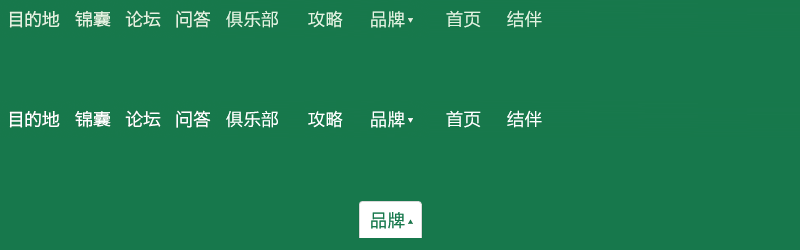
<style>
.page{position:relative;width:800px;height:250px;background:#17784c}
.page>*{position:absolute;margin:0}
.t1{font:17px "YaHei-Consolas-Hybrid";letter-spacing:0.04em;color:#e3f2e1}
.t2{font:17px "YaHei-Consolas-Hybrid";letter-spacing:0.04em;color:#ffffff}
.t3{font:17px "YaHei-Consolas-Hybrid";letter-spacing:0.04em;color:#17784c}
</style>
<div class="page">
<p class="t1" style="left:226px;top:10px;width:52px;height:18px">俱乐部</p>
<p class="t1" style="left:226px;top:10px;width:52px;height:18px;opacity:0.51">俱乐部</p>
<p class="t1" style="left:308px;top:10px;width:35px;height:18px">攻略</p>
<p class="t1" style="left:308px;top:10px;width:35px;height:18px;opacity:0.51">攻略</p>
<p class="t1" style="left:371px;top:11px;width:34px;height:17px">品牌</p>
<p class="t1" style="left:371px;top:11px;width:34px;height:17px;opacity:0.51">品牌</p>
<p class="t1" style="left:446px;top:10px;width:35px;height:18px">首页</p>
<p class="t1" style="left:446px;top:10px;width:35px;height:18px;opacity:0.51">首页</p>
<p class="t1" style="left:507px;top:10px;width:35px;height:18px">结伴</p>
<p class="t1" style="left:507px;top:10px;width:35px;height:18px;opacity:0.51">结伴</p>
<p class="t2" style="left:226px;top:110px;width:52px;height:18px">俱乐部</p>
<p class="t2" style="left:226px;top:110px;width:52px;height:18px;opacity:0.51">俱乐部</p>
<p class="t2" style="left:308px;top:110px;width:35px;height:18px">攻略</p>
<p class="t2" style="left:308px;top:110px;width:35px;height:18px;opacity:0.51">攻略</p>
<p class="t2" style="left:371px;top:111px;width:34px;height:17px">品牌</p>
<p class="t2" style="left:371px;top:111px;width:34px;height:17px;opacity:0.51">品牌</p>
<p class="t2" style="left:446px;top:110px;width:35px;height:18px">首页</p>
<p class="t2" style="left:446px;top:110px;width:35px;height:18px;opacity:0.51">首页</p>
<p class="t2" style="left:507px;top:110px;width:35px;height:18px">结伴</p>
<p class="t2" style="left:507px;top:110px;width:35px;height:18px;opacity:0.51">结伴</p>
<p class="t3" style="left:371px;top:212px;width:34px;height:17px">品牌</p>
<p class="t3" style="left:371px;top:212px;width:34px;height:17px;opacity:0.51">品牌</p>
</div>
